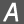
<style>
.page{position:relative;width:24px;height:24px;background:#555555}
.page>*{position:absolute;margin:0}
.t1{font:24px "NewsGothicMT";color:#ffffff;font-weight:bold;font-style:italic}
</style>
<div class="page">
<p class="t1" style="left:3px;top:2px;width:16px;height:20px">A</p>
</div>
